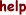
<style>
.page{position:relative;width:26px;height:15px;background:#ffffff}
.page>*{position:absolute;margin:0}
.t1{font:14px "ComicSansMS-Bold";color:#840000}
</style>
<div class="page">
<p class="t1" style="left:0px;top:0px;width:26px;height:15px">help</p>
</div>
